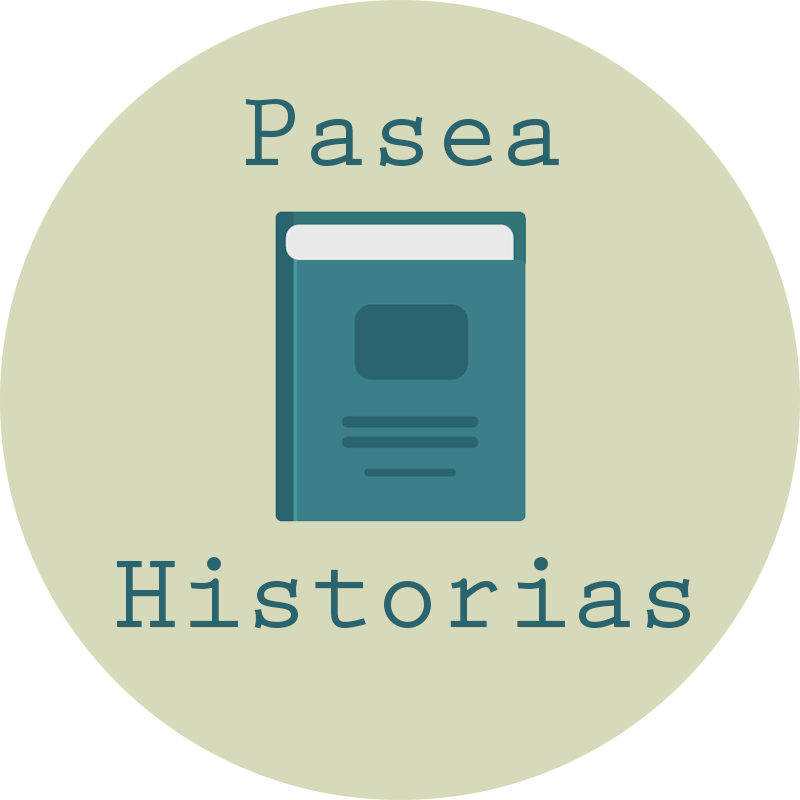
<style>
.page{position:relative;width:800px;height:800px;background:#d7daba}
.page>*{position:absolute;margin:0}
.t1{font:109.4px "PrestigeEliteStd-Bd";color:#2a646e}
</style>
<div class="page">
<p class="t1" style="left:245px;top:99px;width:314px;height:68px">Pasea</p>
<p class="t1" style="left:116px;top:557px;width:574px;height:72px">Historias</p>
</div>
